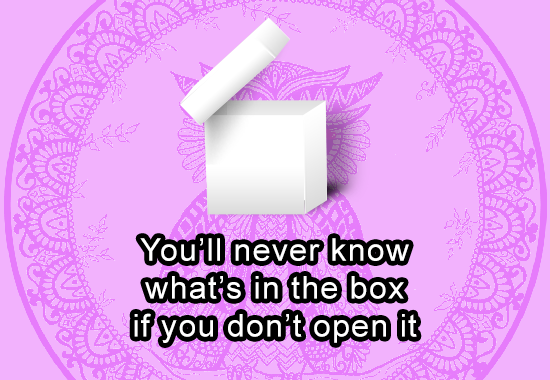
<style>
.page{position:relative;width:550px;height:380px;background:#f2b2fd}
.page>*{position:absolute;margin:0}
.t1{font:31.5px "ArialMT";letter-spacing:0.04em;color:#ffffff}
</style>
<div class="page">
<p class="t1" style="left:134px;top:238px;width:283px;height:105px;text-align:center">You’ll never know<br>what’s in the box<br>if you don’t open it</p>
</div>
